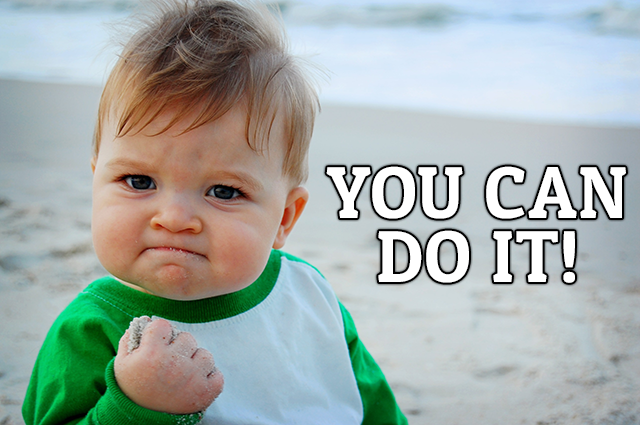
<style>
.page{position:relative;width:640px;height:425px}
.page>*{position:absolute;margin:0}
.t1{font:73.4px "PatuaOne-Regular";letter-spacing:0.025em;color:#ffffff}
</style>
<div class="page">
<p class="t1" style="left:326px;top:166px;width:300px;height:117px">YOU CAN DO IT!</p>
</div>
